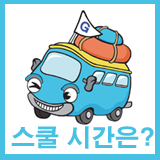
<style>
.page{position:relative;width:160px;height:160px;background:#ffffff}
.page>*{position:absolute;margin:0}
.t1{font:24px "H2gtrE";color:#46c1e3}
</style>
<div class="page">
<p class="t1" style="left:11px;top:126px;width:143px;height:23px">스쿨 시간은?</p>
</div>
